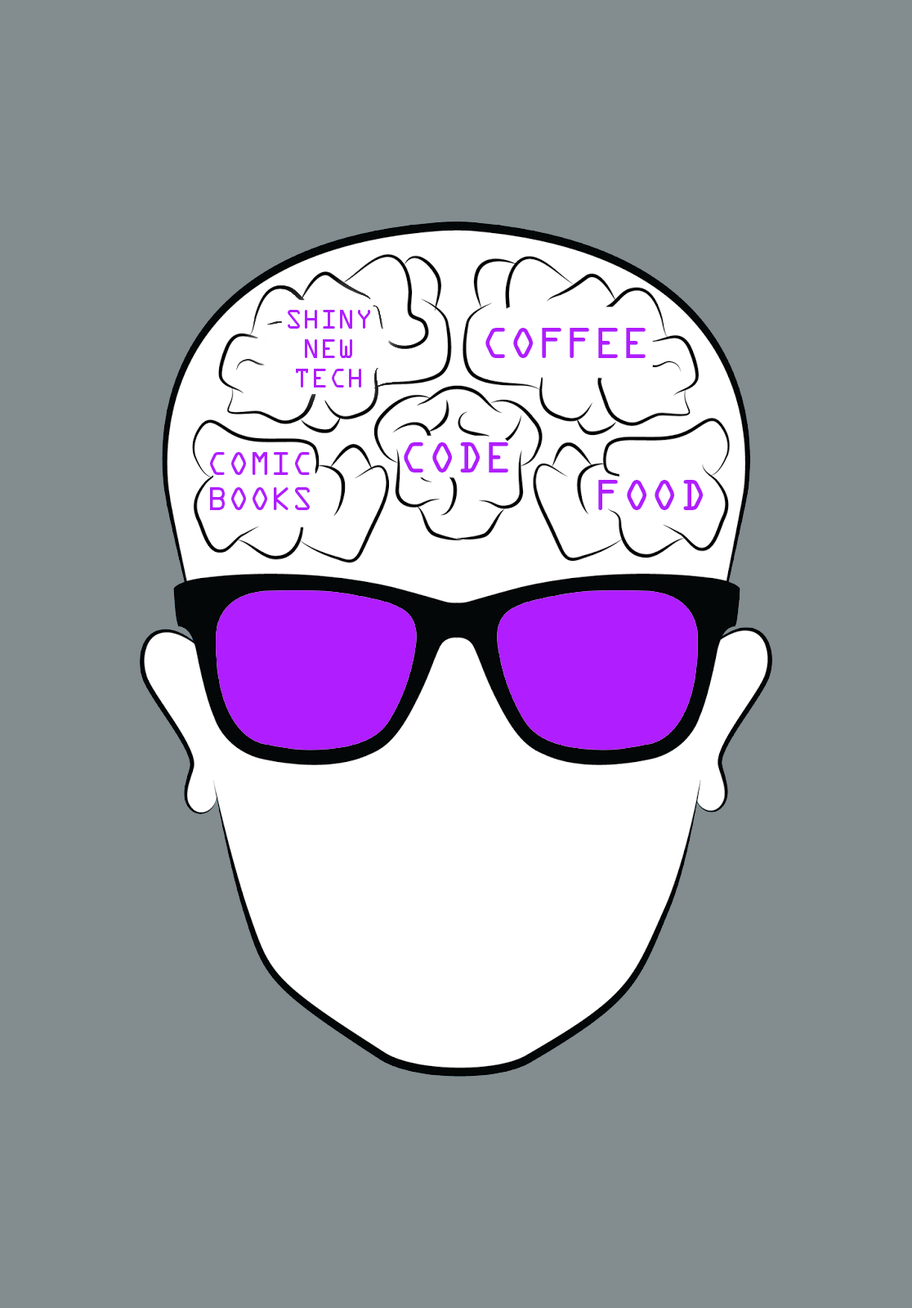
<style>
.page{position:relative;width:912px;height:1308px;background:#838c8f}
.page>*{position:absolute;margin:0}
.t1{font:24.5px "OCRAStd";color:#b01dff}
.t2{font:39.2px "OCRAStd";color:#b01dff}
.t3{font:29.4px "OCRAStd";color:#b01dff}
</style>
<div class="page">
<p class="t1" style="left:288px;top:310px;width:82px;height:77px;text-align:center">SHINY<br>NEW<br>TECH</p>
<p class="t2" style="left:485px;top:328px;width:161px;height:30px">COFFEE</p>
<p class="t2" style="left:404px;top:442px;width:104px;height:30px">CODE</p>
<p class="t3" style="left:210px;top:452px;width:100px;height:58px;text-align:center">COMIC<br>BOOKS</p>
<p class="t2" style="left:598px;top:480px;width:105px;height:30px">FOOD</p>
</div>
